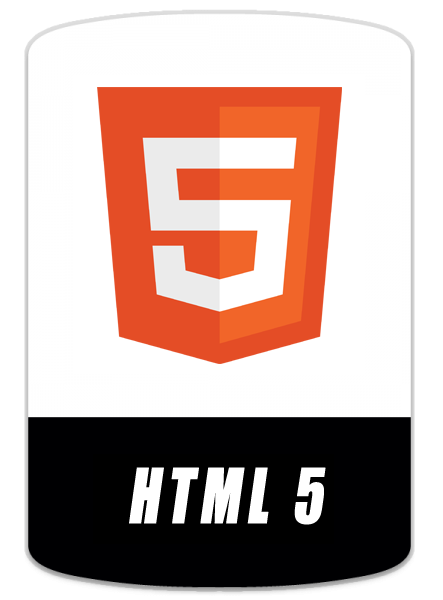
<style>
.page{position:relative;width:443px;height:600px;background:#ffffff}
.page>*{position:absolute;margin:0}
.t1{font:70px "Impact";letter-spacing:0.1em;color:#ffffff;font-weight:bold;font-style:italic;scale:0.8 1}
</style>
<div class="page">
<p class="t1" style="left:129px;top:467px;width:197px;height:58px">HTML 5</p>
</div>
